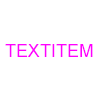
<style>
.page{position:relative;width:100px;height:100px;background:#ffffff}
.page>*{position:absolute;margin:0}
.t1{font:18px "ArialMT";color:#ff00ff}
</style>
<div class="page">
<p class="t1" style="left:5px;top:44px;width:88px;height:13px">TEXTITEM</p>
</div>
